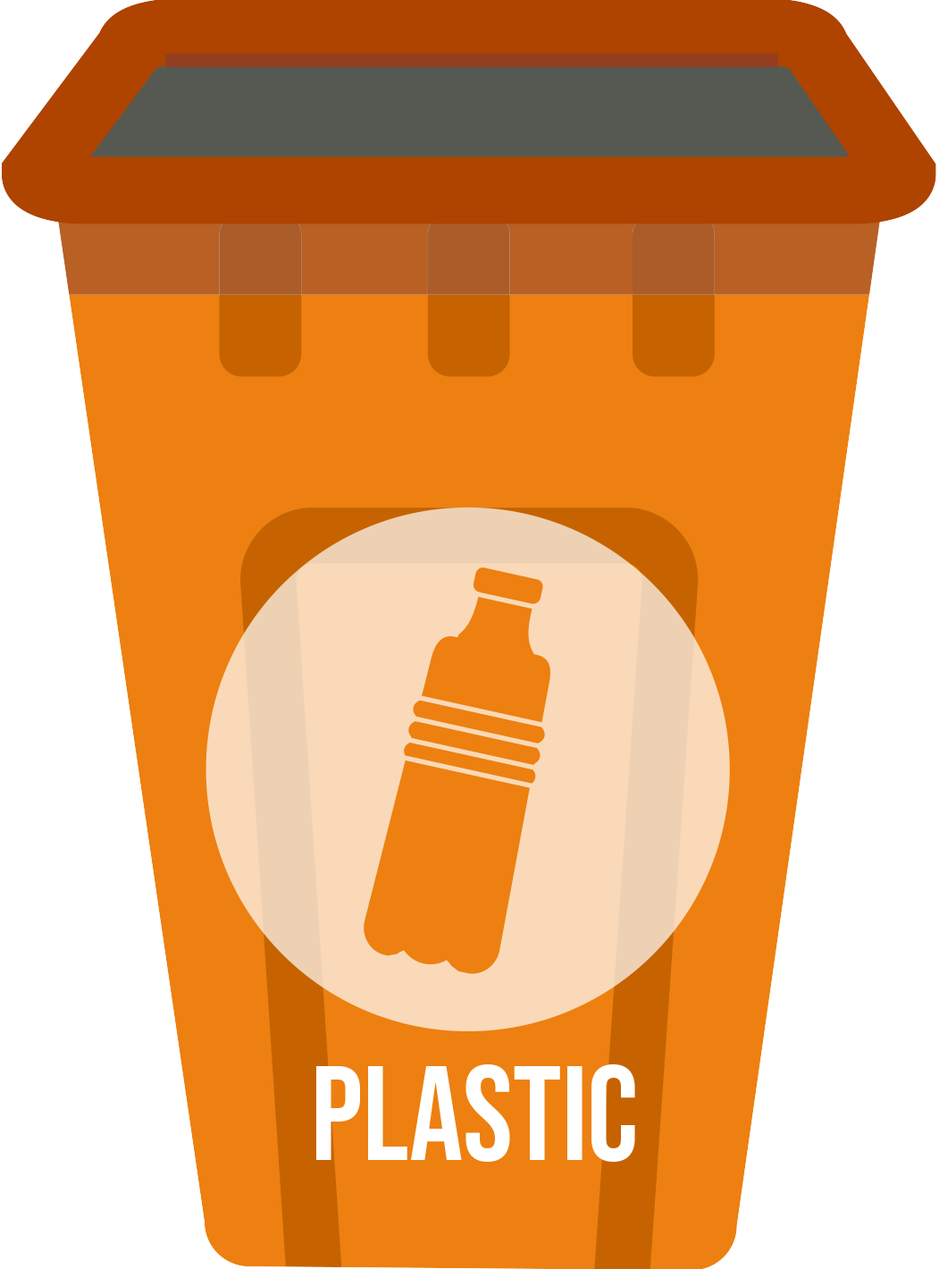
<style>
.page{position:relative;width:939px;height:1269px;background:#ed8010}
.page>*{position:absolute;margin:0}
.t1{font:134.1px "BebasNeue-Regular";color:#ffffff}
</style>
<div class="page">
<p class="t1" style="left:316px;top:1065px;width:320px;height:97px">PLASTIC</p>
</div>
